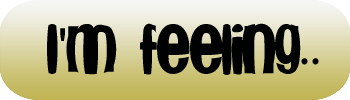
<style>
.page{position:relative;width:350px;height:100px}
.page>*{position:absolute;margin:0}
.t1{font:50px "Fishbowl";color:#000101}
.t2{font:50px "ArialMT";color:#000101}
.t3{font:50px "MyriadPro-Regular";color:#000101}
</style>
<div class="page">
<p class="t1" style="left:47px;top:23px;width:272px;height:52px">I<span class="t2">'</span>m feeling<span class="t3">..</span></p>
</div>
